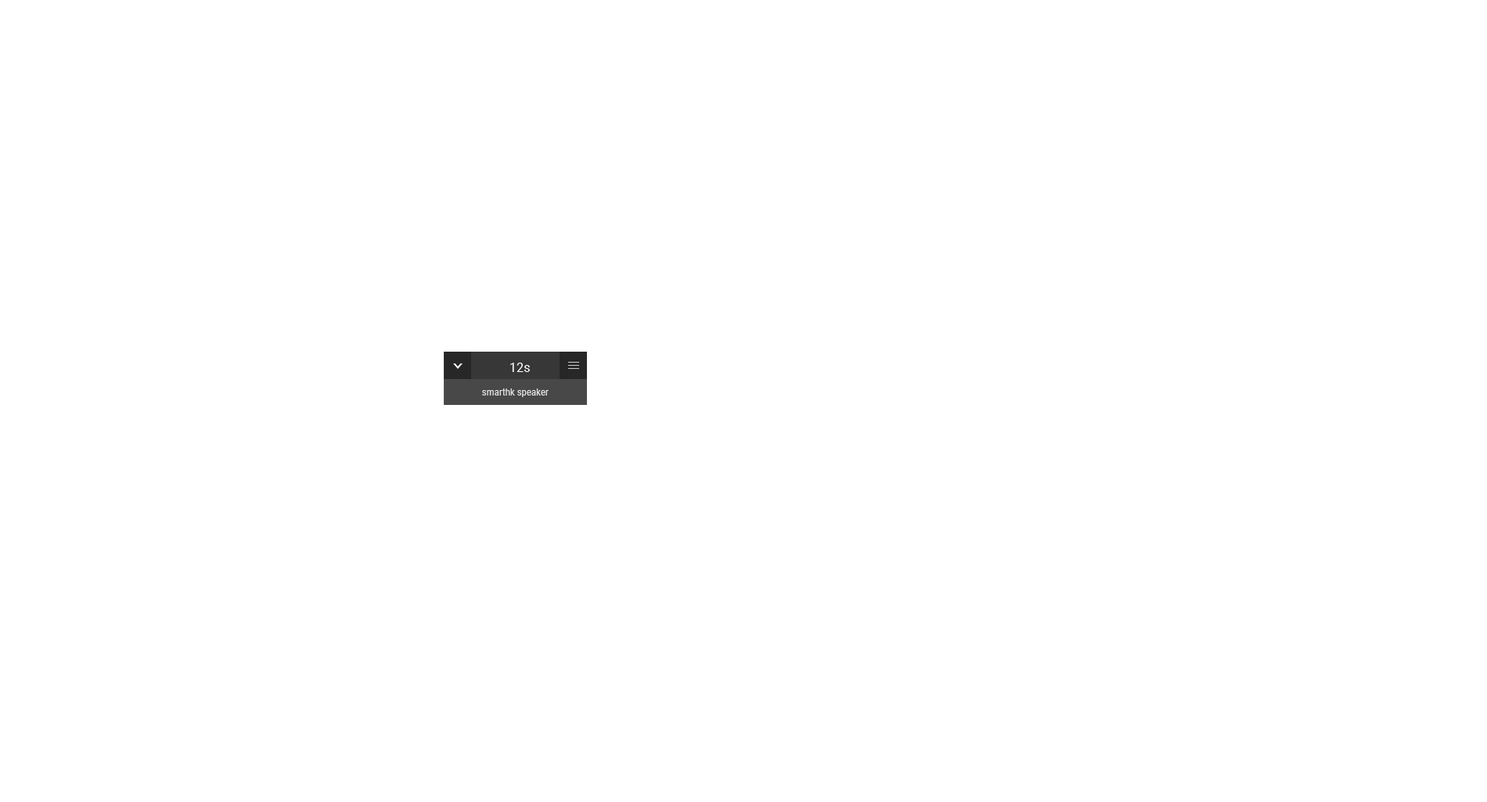
<style>
.page{position:relative;width:1487px;height:802px;background:#ffffff}
.page>*{position:absolute;margin:0}
.t1{font:13.6px "Roboto-Regular";color:#ffffff;scale:0.95 1}
.t2{font:9.4px "Roboto-Regular";color:#e3e3e3;scale:0.95 1}
</style>
<div class="page">
<p class="t1" style="left:510px;top:362px;width:20px;height:10px">12s</p>
<p class="t2" style="left:482px;top:388px;width:67px;height:9px">smarthk speaker</p>
</div>
